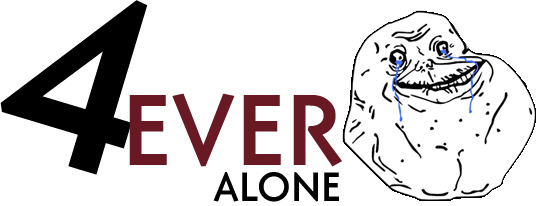
<style>
.page{position:relative;width:536px;height:206px;background:#ffffff}
.page>*{position:absolute;margin:0}
.t1{font:99.9px "CoreSansG-Medium";color:#681924}
.t2{font:40.7px "CoreSansG-Medium";color:#000000}
</style>
<div class="page">
<p class="t1" style="left:129px;top:93px;width:213px;height:74px">EVER</p>
<p class="t2" style="left:213px;top:172px;width:126px;height:30px">ALONE</p>
</div>
